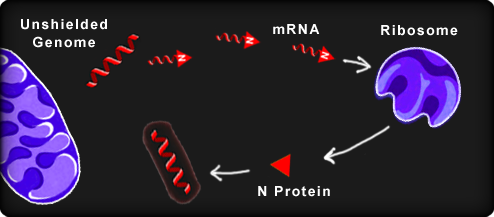
<style>
.page{position:relative;width:494px;height:217px;background:#1b1b1b}
.page>*{position:absolute;margin:0}
.t1{font:14px/18px "Arial-BoldMT";letter-spacing:0.1em;color:#ffffff}
.t2{font:14px "Arial-BoldMT";letter-spacing:0.1em;color:#ffffff}
</style>
<div class="page">
<p class="t1" style="left:21px;top:19px;width:86px;height:29px;text-align:center">Unshielded<br>Genome</p>
<p class="t2" style="left:273px;top:24px;width:47px;height:10px">mRNA</p>
<p class="t2" style="left:381px;top:25px;width:77px;height:11px">Ribosome</p>
<p class="t2" style="left:258px;top:186px;width:72px;height:11px">N Protein</p>
</div>
